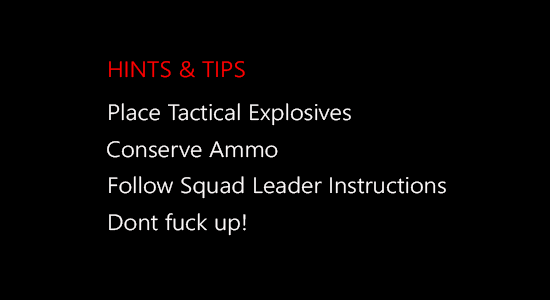
<style>
.page{position:relative;width:550px;height:300px;background:#000000}
.page>*{position:absolute;margin:0}
.t1{font:22.3px "SegoeUI-Semilight";color:#ff0000;scale:1.08 1}
.t2{font:22.3px "SegoeUI-Semilight";color:#fcf9f9;scale:1.08 1}
</style>
<div class="page">
<p class="t1" style="left:109px;top:61px;width:136px;height:17px">HINTS &amp; TIPS</p>
<p class="t2" style="left:109px;top:103px;width:242px;height:23px">Place Tactical Explosives</p>
<p class="t2" style="left:107px;top:141px;width:171px;height:17px">Conserve Ammo</p>
<p class="t2" style="left:109px;top:176px;width:337px;height:23px">Follow Squad Leader Instructions</p>
<p class="t2" style="left:109px;top:213px;width:137px;height:23px">Dont fuck up!</p>
</div>
